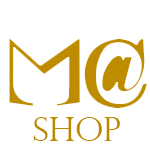
<style>
.page{position:relative;width:150px;height:150px;background:#ffffff}
.page>*{position:absolute;margin:0}
.t1{font:33.4px "PerpetuaTitlingMT-Light";color:#bc8800}
</style>
<div class="page">
<p class="t1" style="left:33px;top:117px;width:87px;height:24px">Shop</p>
</div>
